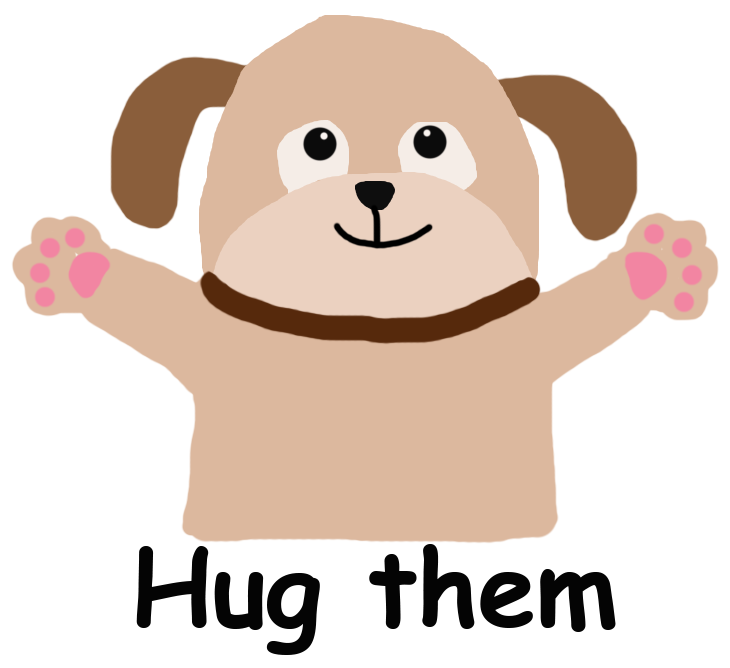
<style>
.page{position:relative;width:730px;height:668px;background:#ffffff}
.page>*{position:absolute;margin:0}
.t1{font:105px "ComicSansMS-Bold";color:#040404}
</style>
<div class="page">
<p class="t1" style="left:136px;top:544px;width:480px;height:111px">Hug them</p>
</div>
